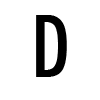
<style>
.page{position:relative;width:100px;height:100px;background:#ffffff}
.page>*{position:absolute;margin:0}
.t1{font:100px "TwCenMT-Condensed";color:#000000}
</style>
<div class="page">
<p class="t1" style="left:36px;top:15px;width:31px;height:62px">D</p>
</div>
